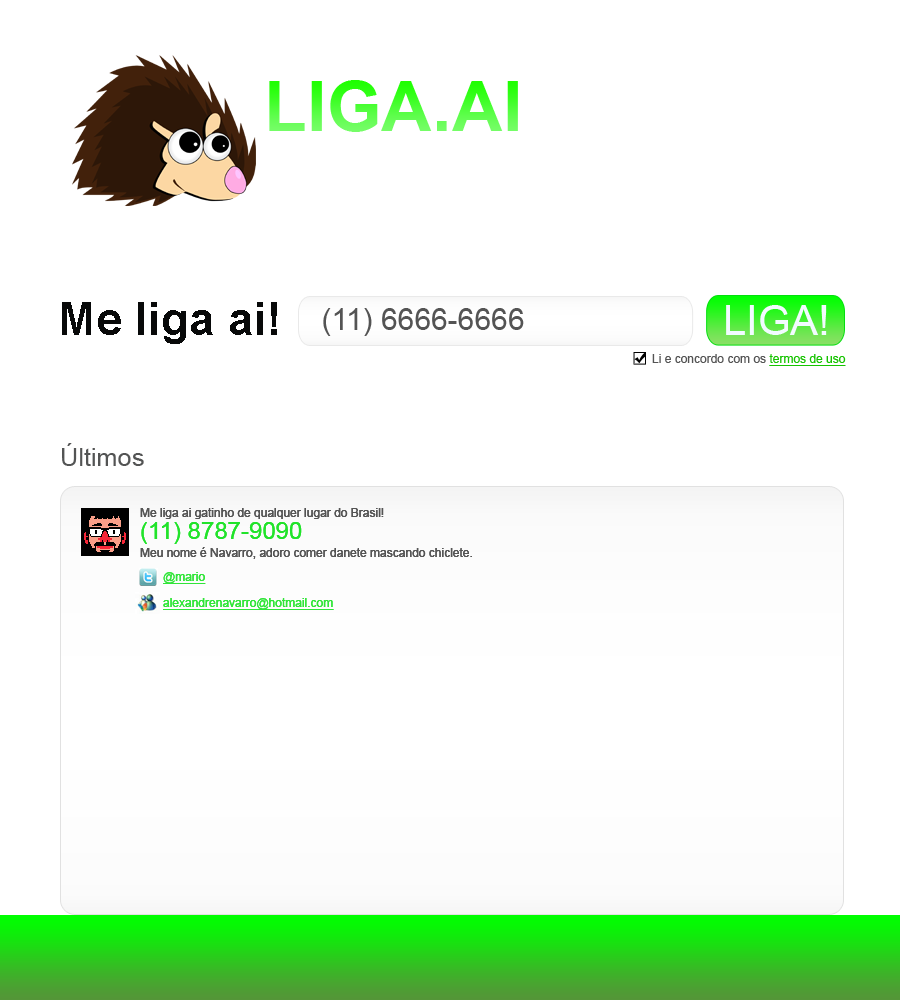
<style>
.page{position:relative;width:900px;height:1000px;background:#ffffff}
.page>*{position:absolute;margin:0}
.t1{font:70.4px "Arial-BoldMT"}
.t2{font:46.4px "Arial-BoldMT";color:#080909}
.t3{font:41.7px "ArialMT";color:#f2fbff}
.t4{font:30px "ArialMT";color:#535454}
.t5{font:12px "ArialMT";color:#545454}
.t6{font:12px "ArialMT";color:#16c300;text-decoration:underline}
.t7{font:25.3px "ArialMT";color:#535454}
.t8{font:12px/18px "ArialMT";color:#545454}
.t9{font:12px/22px "ArialMT";color:#545454}
.t10{font:24px/22px "ArialMT";color:#21e32a}
.t11{font:12px "ArialMT";color:#30e538;text-decoration:underline}
</style>
<div class="page">
<p class="t1" style="left:269px;top:80px;width:249px;height:52px">LIGA.AI</p>
<p class="t2" style="left:62px;top:302px;width:215px;height:42px">Me liga ai!</p>
<p class="t3" style="left:726px;top:305px;width:101px;height:30px">LIGA!</p>
<p class="t4" style="left:323px;top:308px;width:201px;height:28px">(11) 6666-6666</p>
<p class="t5" style="left:652px;top:354px;width:194px;height:12px">Li e concordo com os <span class="t6">termos de uso</span></p>
<p class="t7" style="left:62px;top:443px;width:82px;height:23px">Últimos</p>
<p class="t8" style="left:140px;top:508px;width:332px;height:51px"><span class="t9">Me liga ai gatinho de qualquer lugar do Brasil!<br></span><span class="t10">(11) 8787-9090<br></span>Meu nome é Navarro, adoro comer danete mascando chiclete.</p>
<p class="t8" style="left:140px;top:508px;width:332px;height:51px"><span class="t9">Me liga ai gatinho de qualquer lugar do Brasil!<br></span><span class="t10">(11) 8787-9090<br></span>Meu nome é Navarro, adoro comer danete mascando chiclete.</p>
<p class="t11" style="left:163px;top:572px;width:43px;height:12px">@mario</p>
<p class="t11" style="left:163px;top:572px;width:43px;height:12px">@mario</p>
<p class="t11" style="left:163px;top:598px;width:171px;height:12px">alexandrenavarro@hotmail.com</p>
<p class="t11" style="left:163px;top:598px;width:171px;height:12px">alexandrenavarro@hotmail.com</p>
</div>
